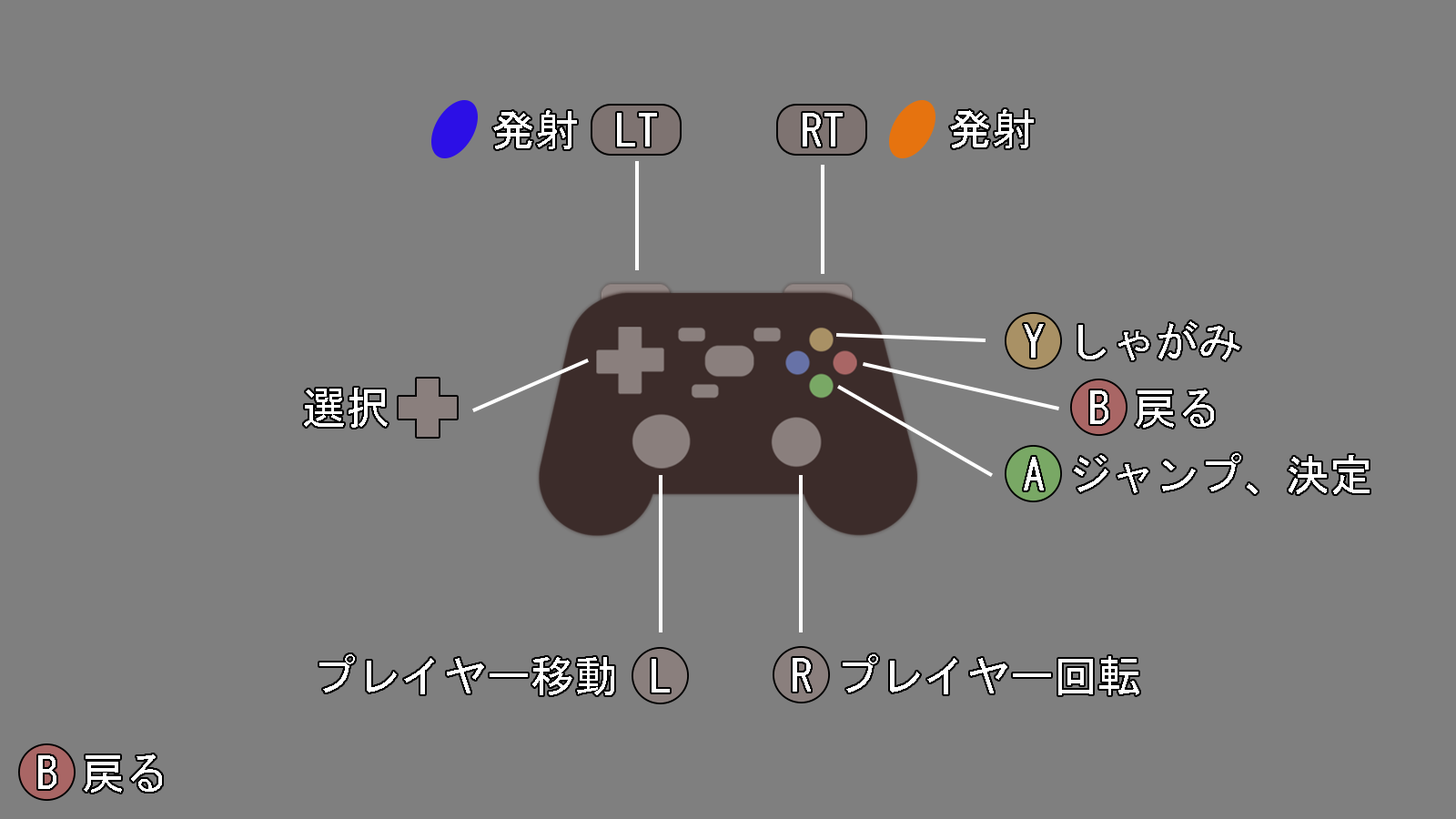
<style>
.page{position:relative;width:1456px;height:819px;background:#7f7f7f}
.page>*{position:absolute;margin:0}
.t1{font:43.8px "MS-Gothic";color:#ffffff}
.t2{font:43.7px "MS-Gothic";color:#ffffff}
</style>
<div class="page">
<p class="t1" style="left:493px;top:110px;width:84px;height:39px">発射</p>
<p class="t1" style="left:617px;top:113px;width:40px;height:34px">LT</p>
<p class="t1" style="left:803px;top:113px;width:40px;height:34px">RT</p>
<p class="t1" style="left:950px;top:109px;width:84px;height:39px">発射</p>
<p class="t2" style="left:1024px;top:324px;width:20px;height:34px">Y</p>
<p class="t2" style="left:1078px;top:321px;width:162px;height:39px">しゃがみ</p>
<p class="t2" style="left:304px;top:388px;width:84px;height:40px">選択</p>
<p class="t2" style="left:1136px;top:389px;width:78px;height:39px">戻る</p>
<p class="t2" style="left:1090px;top:390px;width:18px;height:34px">B</p>
<p class="t2" style="left:1024px;top:457px;width:20px;height:33px">A</p>
<p class="t2" style="left:1074px;top:453px;width:296px;height:41px">ジャンプ、決定</p>
<p class="t2" style="left:319px;top:654px;width:295px;height:41px">プレイヤー移動</p>
<p class="t2" style="left:652px;top:659px;width:18px;height:34px">L</p>
<p class="t2" style="left:793px;top:658px;width:18px;height:34px">R</p>
<p class="t2" style="left:843px;top:654px;width:296px;height:41px">プレイヤー回転</p>
<p class="t2" style="left:38px;top:755px;width:18px;height:34px">B</p>
<p class="t2" style="left:84px;top:754px;width:78px;height:39px">戻る</p>
</div>
